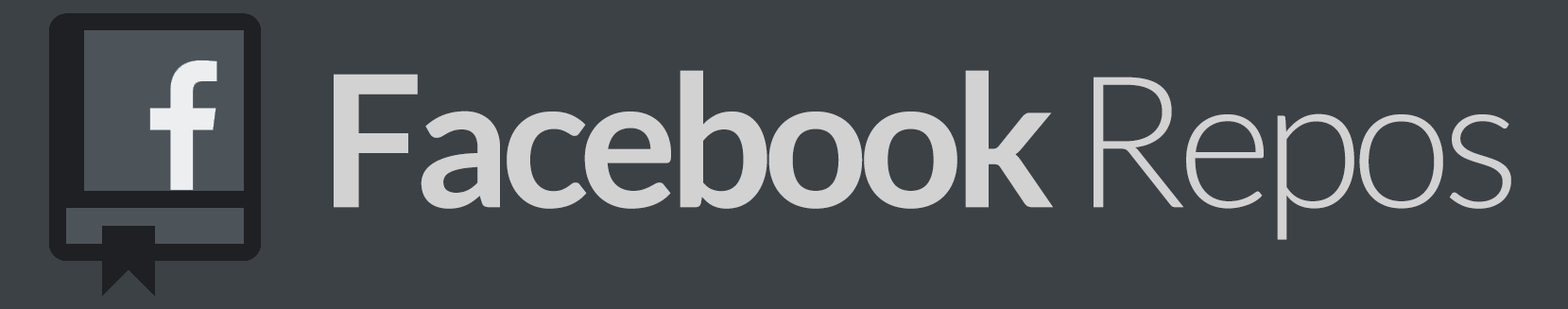
<style>
.page{position:relative;width:1568px;height:309px;background:#3c4146}
.page>*{position:absolute;margin:0}
.t1{font:183.4px "Lato-Bold";letter-spacing:-0.05em;color:#d2d2d3}
.t2{font:183.4px "Lato-Light";letter-spacing:-0.05em;color:#d2d2d3}
</style>
<div class="page">
<p class="t1" style="left:334px;top:70px;width:1177px;height:170px">Facebook <span class="t2">Repos</span></p>
</div>
